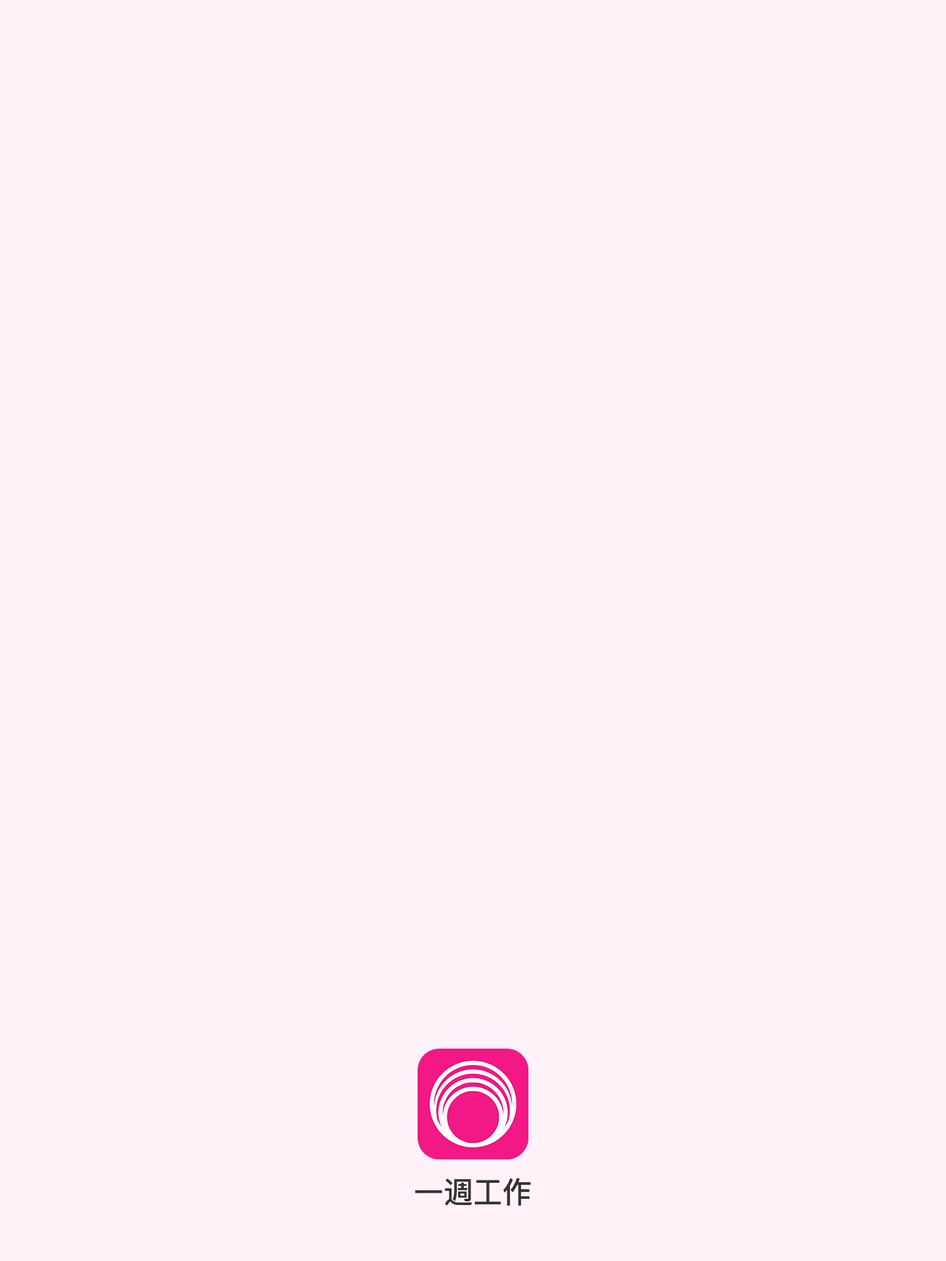
<style>
.page{position:relative;width:946px;height:1261px;background:#fff2f9}
.page>*{position:absolute;margin:0}
.t1{font:29.6px "PingFang-SC-Bold";color:#333333}
</style>
<div class="page">
<p class="t1" style="left:415px;top:1178px;width:116px;height:28px">一週工作</p>
</div>
